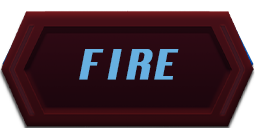
<style>
.page{position:relative;width:257px;height:128px}
.page>*{position:absolute;margin:0}
.t1{font:40.4px "Silom";color:#67b0e1;font-weight:bold;font-style:italic}
</style>
<div class="page">
<p class="t1" style="left:79px;top:49px;width:100px;height:31px">FIRE</p>
</div>
